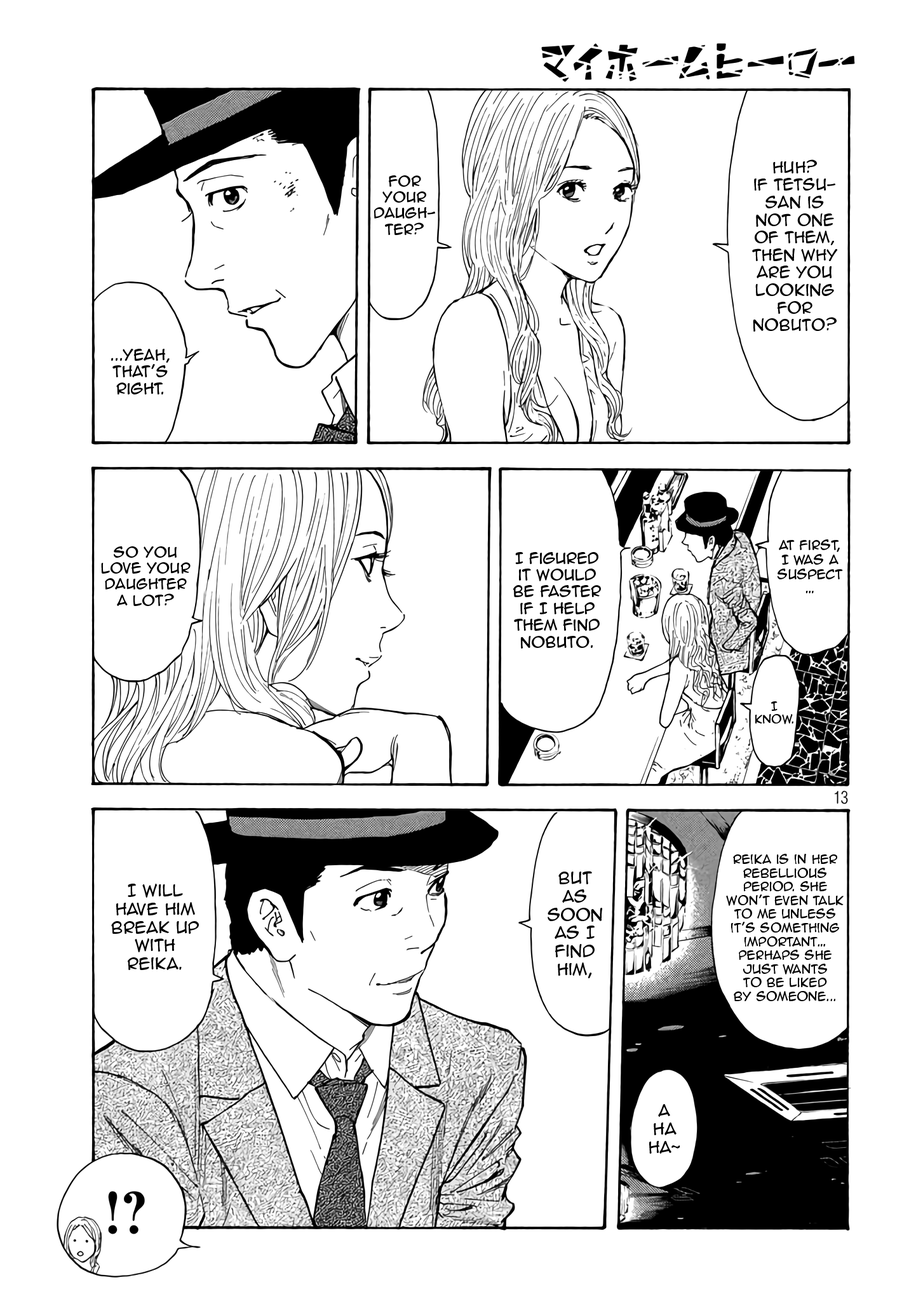
<style>
.page{position:relative;width:916px;height:1301px;background:#ffffff}
.page>*{position:absolute;margin:0}
.t1{font:14.6px "AnimeAce2.0BB";color:#000000}
.t2{font:13.3px "AnimeAce2.0BB";color:#000000}
.t3{font:14px "AnimeAce2.0BB";color:#000000}
.t4{font:12.1px "AnimeAce2.0BB";color:#000000}
.t5{font:10.8px "AnimeAce2.0BB";color:#000000}
.t6{font:11.4px "AnimeAce2.0BB";color:#000000}
.t7{font:15.3px "AnimeAce2.0BB";color:#000000}
</style>
<div class="page">
<p class="t1" style="left:752px;top:159px;width:86px;height:173px;text-align:center">Huh?<br>if Tetsu-<br>san is<br>not one<br>of them,<br>then Why<br>are you<br>looking<br>for<br>Nobuto?</p>
<p class="t2" style="left:374px;top:175px;width:61px;height:60px;text-align:center">For<br>your<br>daugh-<br>ter?</p>
<p class="t3" style="left:111px;top:349px;width:59px;height:46px;text-align:center">...yeah,<br>that’s<br>right.</p>
<p class="t4" style="left:777px;top:539px;width:66px;height:54px;text-align:center">at first,<br>I was a<br>suspect<br>…</p>
<p class="t2" style="left:101px;top:546px;width:90px;height:60px;text-align:center">so You<br>love your<br>daughter<br>a lot?</p>
<p class="t3" style="left:513px;top:552px;width:88px;height:97px;text-align:center">I figured<br>it would<br>be faster<br>if I help them find nobuto.</p>
<p class="t5" style="left:756px;top:702px;width:38px;height:22px;text-align:center">I<br>know.</p>
<p class="t6" style="left:726px;top:854px;width:118px;height:147px;text-align:center">Reika is in her<br>rebellious<br>period. she<br>won’t even talk<br>to me unless<br>it’s something<br>important…<br>perhaps she<br>just wants<br>to be liked<br>by someone...</p>
<p class="t7" style="left:548px;top:871px;width:55px;height:108px;text-align:center">But<br>as<br>Soon<br>As I<br>Find<br>Him,</p>
<p class="t7" style="left:111px;top:884px;width:88px;height:86px;text-align:center">I will<br>have him<br>break up<br>with<br>Reika.</p>
<p class="t7" style="left:649px;top:1104px;width:32px;height:50px;text-align:center">A<br>Ha<br>ha~</p>
</div>
